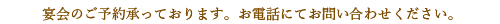
<style>
.page{position:relative;width:500px;height:24px;background:#ffffff}
.page>*{position:absolute;margin:0}
.t1{font:14px "YuMin-Medium";color:#7e4c00}
</style>
<div class="page">
<p class="t1" style="left:42px;top:7px;width:411px;height:14px">宴会のご予約承っております。お電話にてお問い合わせください。</p>
</div>
